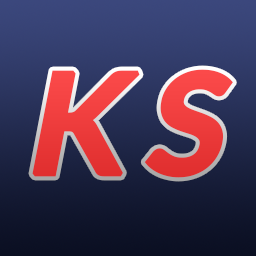
<style>
.page{position:relative;width:256px;height:256px}
.page>*{position:absolute;margin:0}
.t1{font:140.3px "Lato-Bold";letter-spacing:0.12em;color:#ee3d3d;font-weight:bold;font-style:italic}
</style>
<div class="page">
<p class="t1" style="left:32px;top:69px;width:201px;height:109px">KS</p>
</div>
